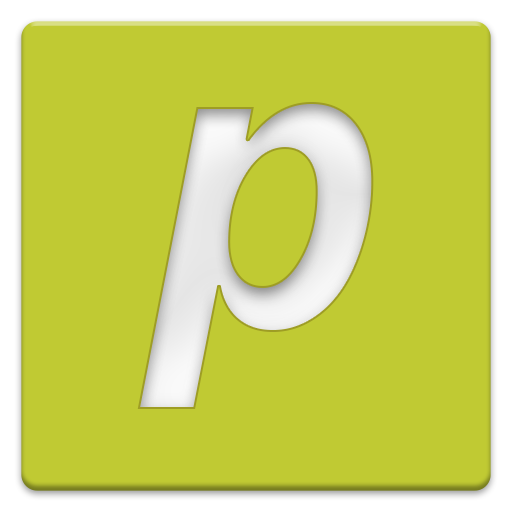
<style>
.page{position:relative;width:512px;height:512px;background:#c0ca33}
.page>*{position:absolute;margin:0}
.t1{font:400px "DejaVuSansMonoForPowerline-BoldOblique";color:#e7e7e7}
</style>
<div class="page">
<p class="t1" style="left:137px;top:102px;width:237px;height:307px">p</p>
</div>
